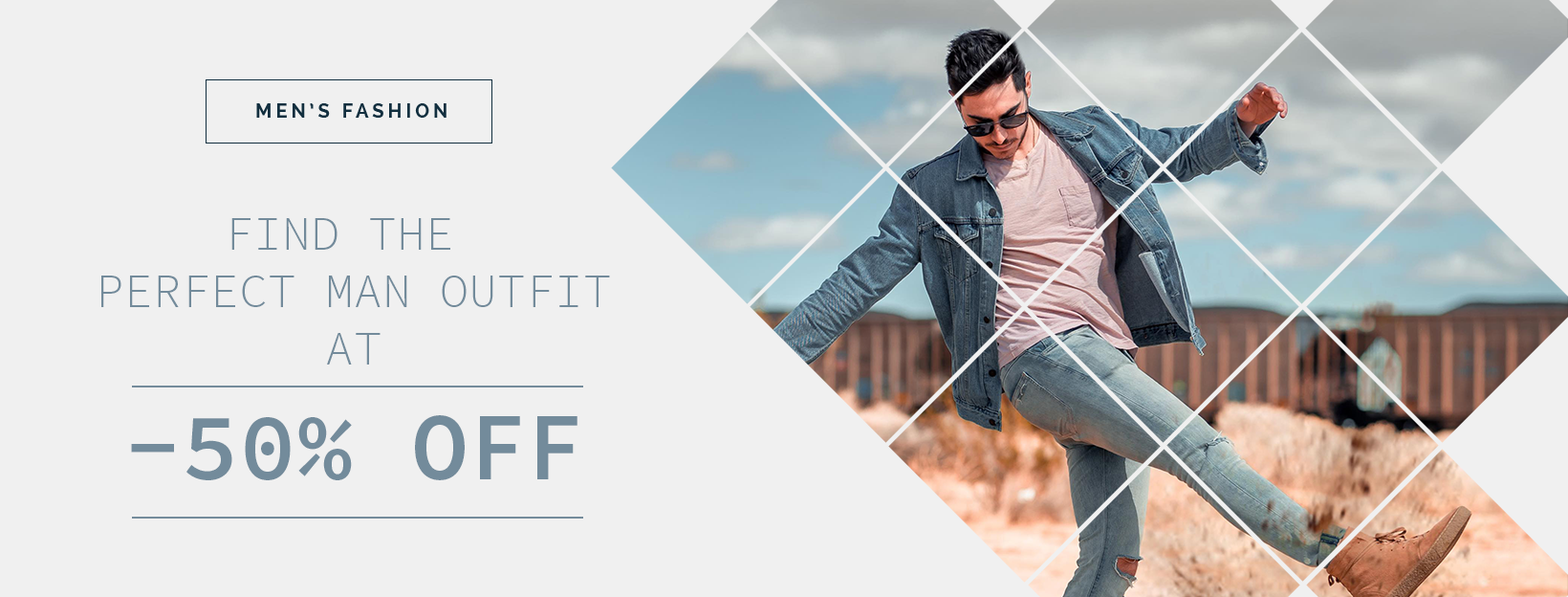
<style>
.page{position:relative;width:1568px;height:597px;background:#f0f0f0}
.page>*{position:absolute;margin:0}
.t1{font:19.1px "Raleway-Bold";letter-spacing:0.2em;color:#122f3f}
.t2{font:47.8px "SourceCodePro-Light";color:#738b9b;text-transform:uppercase}
.t3{font:95.6px "SourceCodePro-Semibold";color:#738b9b;text-transform:uppercase}
</style>
<div class="page">
<p class="t1" style="left:256px;top:103px;width:190px;height:15px">MEN’S FASHION</p>
<p class="t2" style="left:101px;top:218px;width:509px;height:262px;text-align:center">Find the <br>perfect MAN outfit<br>at<br><span class="t3">-50% OFF</span></p>
</div>
